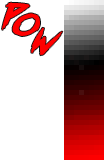
<style>
.page{position:relative;width:104px;height:160px;background:#ffffff}
.page>*{position:absolute;margin:0}
.t1{font:26px "outrunfuture";color:#ff0000;text-transform:uppercase;scale:1.06 1}
.t2{font:26px "outrunfuture";color:#ff0000;text-transform:uppercase}
</style>
<div class="page">
<p class="t1" style="left:2px;top:2px;width:28px;height:28px;rotate:4deg">P</p>
<p class="t2" style="left:12px;top:13px;width:28px;height:23px;rotate:10deg">O</p>
<p class="t2" style="left:31px;top:27px;width:32px;height:29px;rotate:10deg">W</p>
</div>
